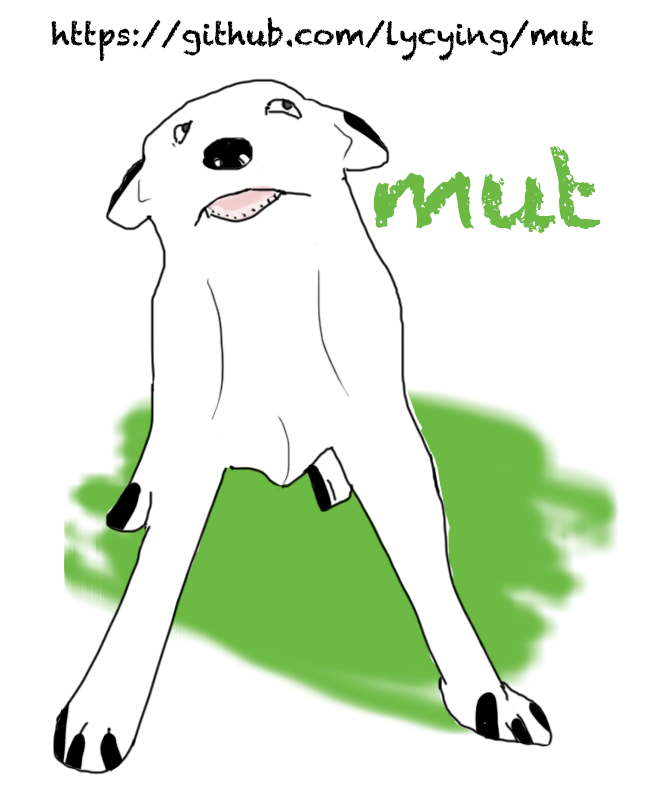
<style>
.page{position:relative;width:650px;height:800px;background:#ffffff}
.page>*{position:absolute;margin:0}
.t1{font:30px "Chalkduster";color:#000000}
.t2{font:88.8px "Chalkduster";color:#6cb943}
</style>
<div class="page">
<p class="t1" style="left:51px;top:17px;width:542px;height:45px">https://github.com/lycying/mut</p>
<p class="t2" style="left:373px;top:146px;width:228px;height:88px">mut</p>
</div>
